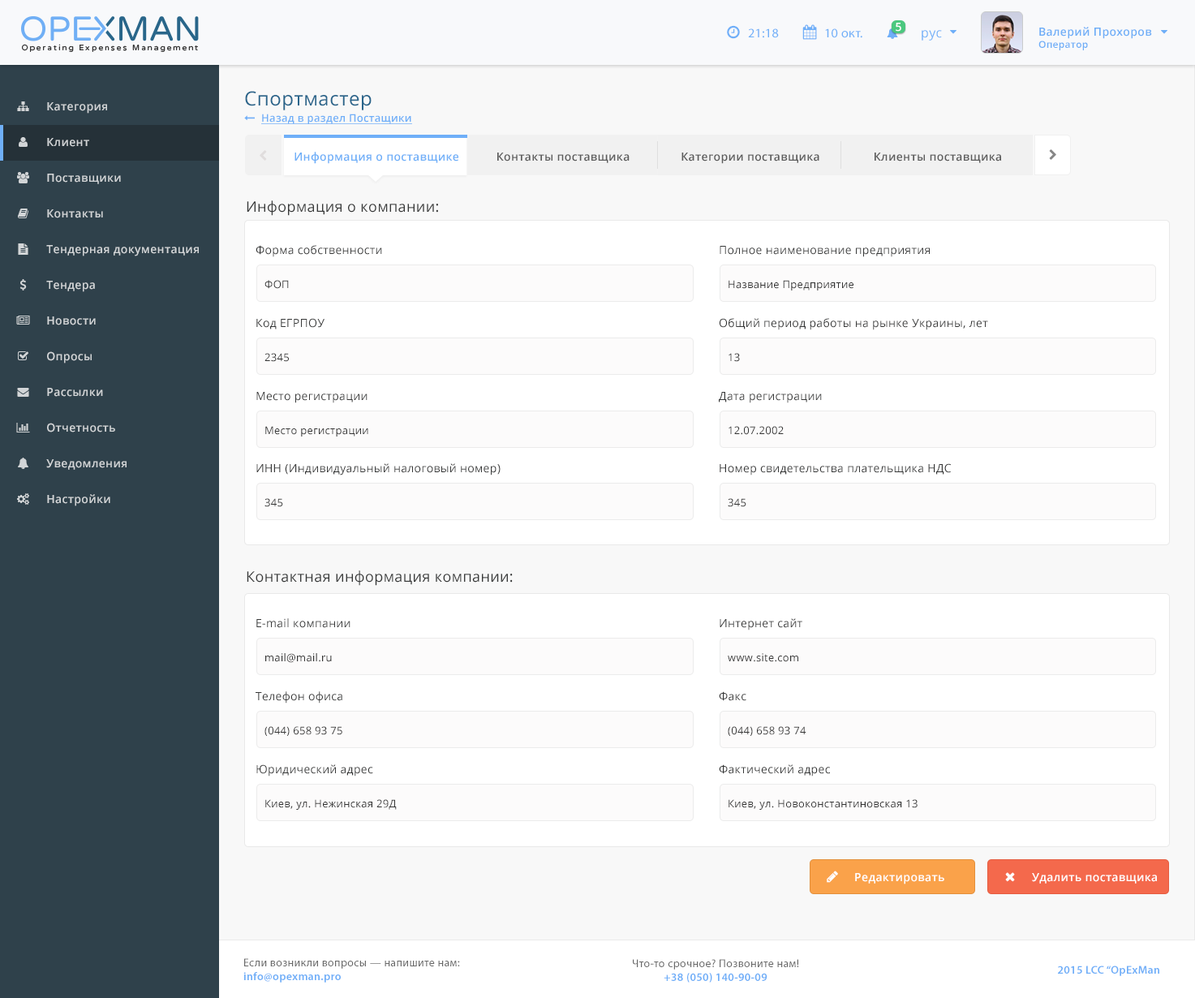
<style>
.page{position:relative;width:1195px;height:998px;background:#ffffff}
.page>*{position:absolute;margin:0}
.t1{font:12.9px "MyriadPro-Regular";letter-spacing:0.025em;color:#6faff8}
.t2{font:11.3px "OpenSans-Semibold";letter-spacing:0.025em;color:#ffffff}
.t3{font:11.3px "OpenSans-Semibold";letter-spacing:0.025em;color:#6eaef7}
.t4{font:9.7px "OpenSans-Semibold";letter-spacing:0.025em;color:#6eaef7}
.t5{font:12.9px "OpenSans";letter-spacing:0.025em;color:#6eaff8}
.t6{font:19.4px "OpenSans";letter-spacing:0.025em;color:#29658b}
.t7{font:11.3px "OpenSans-Semibold";letter-spacing:0.025em;color:#d2d5d7}
.t8{font:10.5px "OpenSans-Semibold";letter-spacing:0.025em;color:#6faff8;text-decoration:underline}
.t9{font:11.3px "OpenSans-Semibold";letter-spacing:0.025em;color:#6eaff8}
.t10{font:11.3px "OpenSans-Semibold";letter-spacing:0.025em;color:#5a5a5a}
.t11{font:14.5px "OpenSans";letter-spacing:0.025em;color:#373838}
.t12{font:11.3px "OpenSans";letter-spacing:0.025em;color:#373838}
.t13{font:10.5px "OpenSans";letter-spacing:0.025em;color:#333333}
.t14{font:11.3px "MyriadPro-Regular";letter-spacing:0.025em;color:#696969}
.t15{font:11.3px "MyriadPro-Semibold";letter-spacing:0.025em;color:#6eaef8}
</style>
<div class="page">
<p class="t1" style="left:748px;top:28px;width:31px;height:10px">21:18</p>
<p class="t1" style="left:825px;top:28px;width:37px;height:10px">10 окт.</p>
<p class="t2" style="left:896px;top:23px;width:5px;height:9px">5</p>
<p class="t3" style="left:1038px;top:27px;width:114px;height:23px">Валерий Прохоров<br><span class="t4">Оператор</span></p>
<p class="t5" style="left:922px;top:30px;width:20px;height:11px">рус</p>
<p class="t6" style="left:245px;top:91px;width:127px;height:19px">Спортмастер</p>
<p class="t7" style="left:47px;top:102px;width:60px;height:12px">Категория</p>
<p class="t8" style="left:261px;top:114px;width:151px;height:10px">Назад в раздел Постащики</p>
<p class="t7" style="left:47px;top:138px;width:42px;height:9px">Клиент</p>
<p class="t9" style="left:294px;top:152px;width:164px;height:12px">Информация о поставщике</p>
<p class="t10" style="left:497px;top:153px;width:133px;height:10px">Контакты поставщика</p>
<p class="t10" style="left:681px;top:153px;width:138px;height:11px">Категории поставщика</p>
<p class="t10" style="left:875px;top:153px;width:126px;height:10px">Клиенты поставщика</p>
<p class="t7" style="left:47px;top:174px;width:74px;height:10px">Поставщики</p>
<p class="t7" style="left:47px;top:209px;width:56px;height:9px">Контакты</p>
<p class="t11" style="left:247px;top:200px;width:191px;height:16px">Информация о компании:</p>
<p class="t7" style="left:46px;top:245px;width:153px;height:11px">Тендерная документация</p>
<p class="t12" style="left:256px;top:245px;width:126px;height:12px">Форма собственности</p>
<p class="t12" style="left:720px;top:246px;width:210px;height:11px">Полное наименование предприятия</p>
<p class="t7" style="left:46px;top:281px;width:49px;height:11px">Тендера</p>
<p class="t13" style="left:264px;top:280px;width:25px;height:9px">ФОП</p>
<p class="t13" style="left:729px;top:280px;width:124px;height:10px">Название Предприятие</p>
<p class="t7" style="left:47px;top:316px;width:49px;height:9px">Новости</p>
<p class="t12" style="left:256px;top:318px;width:69px;height:11px">Код ЕГРПОУ</p>
<p class="t12" style="left:719px;top:318px;width:269px;height:12px">Общий период работы на рынке Украины, лет</p>
<p class="t7" style="left:47px;top:351px;width:45px;height:12px">Опросы</p>
<p class="t13" style="left:264px;top:353px;width:25px;height:9px">2345</p>
<p class="t13" style="left:729px;top:353px;width:11px;height:9px">13</p>
<p class="t7" style="left:47px;top:388px;width:56px;height:9px">Рассылки</p>
<p class="t12" style="left:256px;top:392px;width:112px;height:11px">Место регистрации</p>
<p class="t12" style="left:719px;top:392px;width:103px;height:11px">Дата регистрации</p>
<p class="t7" style="left:47px;top:423px;width:68px;height:9px">Отчетность</p>
<p class="t13" style="left:265px;top:426px;width:103px;height:10px">Место регистрации</p>
<p class="t13" style="left:729px;top:426px;width:55px;height:9px">12.07.2002</p>
<p class="t7" style="left:46px;top:459px;width:81px;height:11px">Уведомления</p>
<p class="t12" style="left:256px;top:463px;width:245px;height:12px">ИНН (Индивидуальный налоговый номер)</p>
<p class="t12" style="left:720px;top:463px;width:231px;height:12px">Номер свидетельства плательщика НДС</p>
<p class="t7" style="left:47px;top:494px;width:63px;height:12px">Настройки</p>
<p class="t13" style="left:264px;top:498px;width:19px;height:9px">345</p>
<p class="t13" style="left:728px;top:498px;width:18px;height:9px">345</p>
<p class="t11" style="left:247px;top:570px;width:266px;height:16px">Контактная информация компании:</p>
<p class="t12" style="left:256px;top:618px;width:94px;height:10px">E-mail компании</p>
<p class="t12" style="left:720px;top:618px;width:82px;height:12px">Интернет сайт</p>
<p class="t13" style="left:265px;top:653px;width:67px;height:10px">mail@mail.ru</p>
<p class="t13" style="left:728px;top:653px;width:70px;height:9px">www.site.com</p>
<p class="t12" style="left:256px;top:691px;width:86px;height:12px">Телефон офиса</p>
<p class="t12" style="left:719px;top:691px;width:27px;height:10px">Факс</p>
<p class="t13" style="left:264px;top:726px;width:78px;height:10px">(044) 658 93 75</p>
<p class="t13" style="left:728px;top:726px;width:78px;height:10px">(044) 658 93 74</p>
<p class="t12" style="left:256px;top:764px;width:117px;height:12px">Юридический адрес</p>
<p class="t12" style="left:719px;top:764px;width:111px;height:12px">Фактический адрес</p>
<p class="t13" style="left:265px;top:799px;width:132px;height:11px">Киев, ул. Нежинская 29Д</p>
<p class="t13" style="left:729px;top:799px;width:189px;height:11px">Киев, ул. Новоконстантиновская 13</p>
<p class="t2" style="left:855px;top:873px;width:89px;height:11px">Редактировать</p>
<p class="t2" style="left:1032px;top:873px;width:125px;height:10px">Удалить поставщика</p>
<p class="t14" style="left:243px;top:958px;width:217px;height:24px">Если возникли вопросы — напишите нам:<br><span class="t15">info@opexman.pro</span></p>
<p class="t14" style="left:633px;top:959px;width:166px;height:23px;text-align:center">Что-то срочное? Позвоните нам!<br><span class="t15">+38 (050) 140-90-09</span></p>
<p class="t15" style="left:1058px;top:965px;width:101px;height:11px">2015 LCC “OpExMan</p>
</div>
